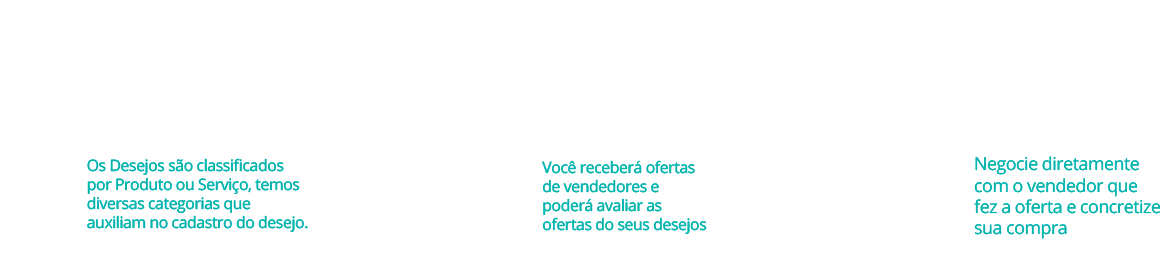
<style>
.page{position:relative;width:1170px;height:272px;background:#ffffff}
.page>*{position:absolute;margin:0}
.t1{font:15.8px "OpenSans";letter-spacing:-0.025em;color:#04b4ae}
.t2{font:17.8px "OpenSans";letter-spacing:-0.025em;color:#04b4ae}
</style>
<div class="page">
<p class="t1" style="left:87px;top:158px;width:221px;height:74px">Os Desejos são classificados por Produto ou Serviço, temos diversas categorias que auxiliam no cadastro do desejo.</p>
<p class="t1" style="left:87px;top:158px;width:221px;height:74px">Os Desejos são classificados por Produto ou Serviço, temos diversas categorias que auxiliam no cadastro do desejo.</p>
<p class="t1" style="left:542px;top:160px;width:165px;height:74px">Você receberá ofertas de vendedores e poderá avaliar as ofertas do seus desejos</p>
<p class="t1" style="left:542px;top:160px;width:165px;height:74px">Você receberá ofertas de vendedores e poderá avaliar as ofertas do seus desejos</p>
<p class="t2" style="left:974px;top:156px;width:187px;height:83px">Negocie diretamente com o vendedor que fez a oferta e concretize sua compra</p>
<p class="t2" style="left:974px;top:156px;width:187px;height:83px">Negocie diretamente com o vendedor que fez a oferta e concretize sua compra</p>
</div>
